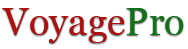
<style>
.page{position:relative;width:188px;height:49px;background:#ffffff}
.page>*{position:absolute;margin:0}
.t1{font:39.1px "Georgia";color:#ae0f0f}
.t2{font:39.1px "Georgia";color:#107217}
</style>
<div class="page">
<p class="t1" style="left:2px;top:8px;width:182px;height:35px">Voyage<span class="t2">Pro</span></p>
</div>
